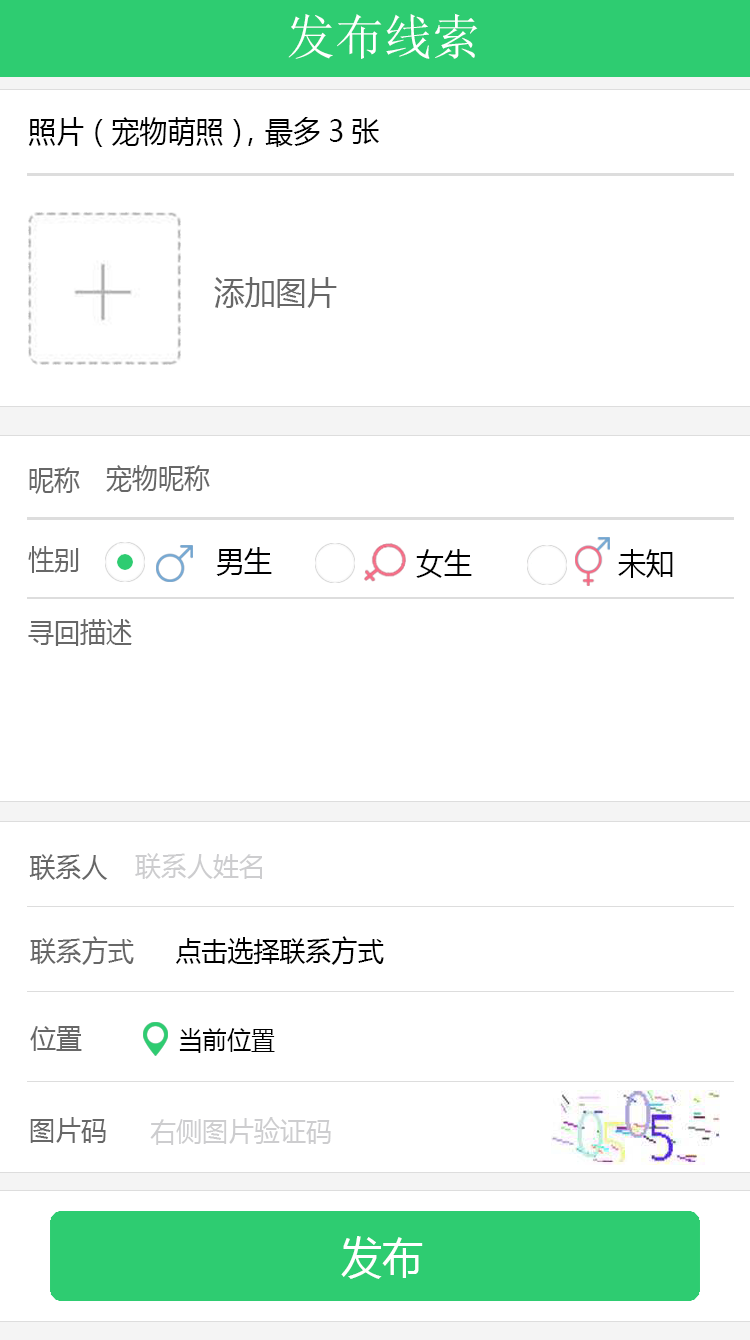
<style>
.page{position:relative;width:750px;height:1340px;background:#ffffff}
.page>*{position:absolute;margin:0}
.t1{font:48.7px "SimSun";color:#ffffff}
.t2{font:30px "MicrosoftYaHei";color:#000000;scale:0.93 1}
.t3{font:33px "MicrosoftYaHei";color:#676767;scale:0.93 1}
.t4{font:28px "MicrosoftYaHei";color:#676767;scale:0.93 1}
.t5{font:30px "MicrosoftYaHei";color:#000001;scale:0.93 1}
.t6{font:28px "MicrosoftYaHei";color:#cdcdcf;scale:0.93 1}
.t7{font:28px "MicrosoftYaHei";color:#000000;scale:0.93 1}
.t8{font:26px "MicrosoftYaHei";color:#000000;scale:0.93 1}
.t9{font:44px "MicrosoftYaHei";color:#ffffff;scale:0.93 1}
</style>
<div class="page">
<p class="t1" style="left:288px;top:13px;width:190px;height:46px">发布线索</p>
<p class="t2" style="left:28px;top:117px;width:351px;height:30px">照片（宠物萌照），最多3张</p>
<p class="t3" style="left:214px;top:277px;width:123px;height:31px">添加图片</p>
<p class="t4" style="left:29px;top:467px;width:51px;height:27px">昵称</p>
<p class="t4" style="left:106px;top:465px;width:104px;height:27px">宠物昵称</p>
<p class="t4" style="left:28px;top:546px;width:51px;height:27px">性别</p>
<p class="t5" style="left:216px;top:547px;width:56px;height:29px">男生</p>
<p class="t2" style="left:416px;top:549px;width:56px;height:29px">女生</p>
<p class="t2" style="left:618px;top:549px;width:55px;height:29px">未知</p>
<p class="t4" style="left:28px;top:619px;width:104px;height:27px">寻回描述</p>
<p class="t4" style="left:29px;top:854px;width:79px;height:26px">联系人</p>
<p class="t6" style="left:135px;top:853px;width:127px;height:26px">联系人姓名</p>
<p class="t4" style="left:30px;top:936px;width:104px;height:29px">联系方式</p>
<p class="t7" style="left:176px;top:936px;width:208px;height:29px">点击选择联系方式</p>
<p class="t4" style="left:30px;top:1026px;width:52px;height:25px">位置</p>
<p class="t8" style="left:179px;top:1028px;width:96px;height:25px">当前位置</p>
<p class="t4" style="left:30px;top:1117px;width:76px;height:26px">图片码</p>
<p class="t6" style="left:150px;top:1117px;width:181px;height:28px">右侧图片验证码</p>
<p class="t9" style="left:341px;top:1236px;width:82px;height:43px">发布</p>
</div>
